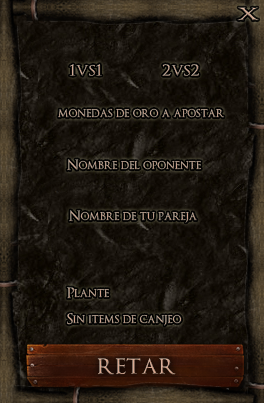
<style>
.page{position:relative;width:264px;height:403px}
.page>*{position:absolute;margin:0}
.t1{font:16.5px "OptimusPrinceps";color:#d0a58f;scale:1.85 1}
.t2{font:19.1px "OptimusPrinceps";scale:1.09 1}
.t3{font:19.1px "OptimusPrinceps";color:#ca9e87;scale:1.09 1}
.t4{font:14px "OptimusPrinceps";color:#c59984}
.t5{font:14px "OptimusPrinceps";color:#cea18a}
.t6{font:14px "OptimusPrinceps";color:#cfa18a}
.t7{font:14px "OptimusPrinceps"}
.t8{font:14px "OptimusPrinceps";color:#d0a28b}
.t9{font:28px "OptimusPrinceps";color:#d8a78f;scale:1.07 1}
</style>
<div class="page">
<p class="t1" style="left:237px;top:7px;width:22px;height:14px">X</p>
<p class="t2" style="left:69px;top:64px;width:33px;height:12px">1vs1</p>
<p class="t3" style="left:162px;top:64px;width:37px;height:12px">2vs2</p>
<p class="t4" style="left:58px;top:108px;width:166px;height:10px">monedas de oro a apostar</p>
<p class="t5" style="left:67px;top:159px;width:134px;height:12px">Nombre del oponente</p>
<p class="t6" style="left:69px;top:210px;width:128px;height:13px">Nombre de tu pareja</p>
<p class="t7" style="left:67px;top:287px;width:42px;height:12px">Plante</p>
<p class="t8" style="left:67px;top:313px;width:115px;height:13px">Sin items de canjeo</p>
<p class="t9" style="left:97px;top:358px;width:79px;height:17px">retar</p>
</div>
